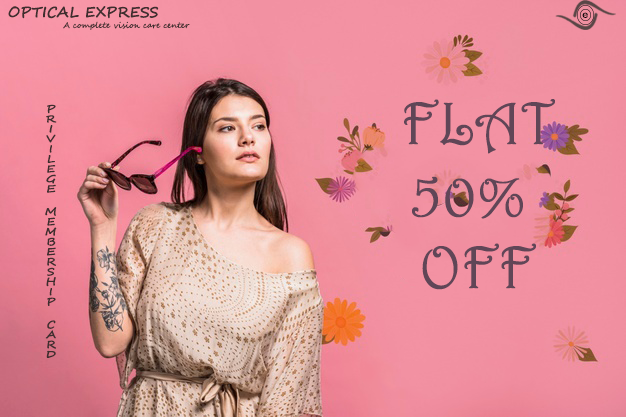
<style>
.page{position:relative;width:626px;height:417px}
.page>*{position:absolute;margin:0}
.t1{font:14px "SegoeScript";color:#3e2e2e;font-weight:bold}
.t2{font:9.6px "MicrosoftSansSerif";color:#080606;scale:1.14 1}
.t3{font:8px "SegoeScript";color:#3e2e2e}
.t4{font:60px "Harrington";color:#604657;font-weight:bold}
.t5{font:10px "SegoeScript";color:#3e2e2e;font-weight:bold;scale:1.2 1}
</style>
<div class="page">
<p class="t1" style="left:8px;top:6px;width:151px;height:13px">OPTICAL EXPRESS</p>
<p class="t2" style="left:582px;top:12px;width:6px;height:6px">e</p>
<p class="t3" style="left:63px;top:21px;width:127px;height:9px">A complete vision care center</p>
<p class="t4" style="left:404px;top:99px;width:151px;height:191px;text-align:center">FLAT<br>50% <br>OFF</p>
<p class="t5" style="left:45px;top:104px;width:12px;height:254px">PRIVILEGE   MEMBERSHIP   CARD</p>
</div>
